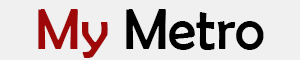
<style>
.page{position:relative;width:300px;height:60px;background:#f0f0f0}
.page>*{position:absolute;margin:0}
.t1{font:57.8px "BerlinSansFB-Reg";color:#000000}
.t2{font:57.8px "BerlinSansFB-Reg";color:#9f0808}
</style>
<div class="page">
<p class="t1" style="left:38px;top:9px;width:226px;height:49px"><span class="t2">My</span> Metro</p>
</div>
